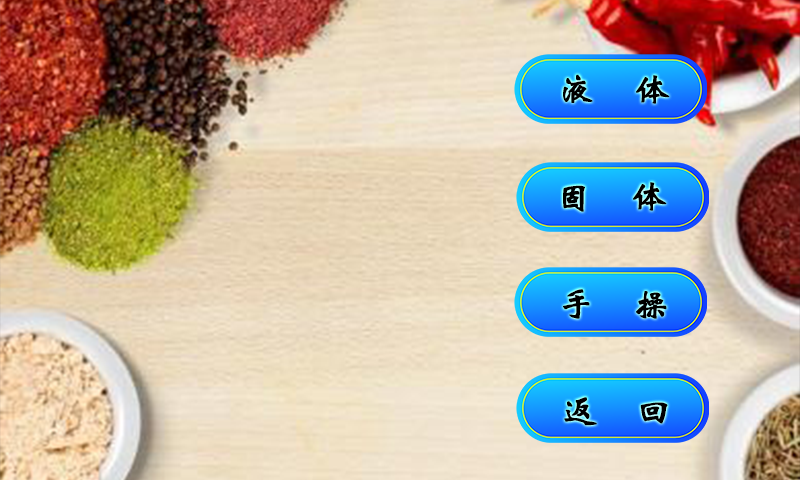
<style>
.page{position:relative;width:800px;height:480px}
.page>*{position:absolute;margin:0}
.t1{font:36px "STXinwei";letter-spacing:-0.005em;color:#000000;font-weight:bold}
.t2{font:100px "STXinwei";letter-spacing:-0.005em;color:#ff0000;font-weight:bold}
</style>
<div class="page">
<p class="t1" style="left:563px;top:74px;width:107px;height:30px"><span class="t2"> </span>液    体</p>
<p class="t1" style="left:563px;top:182px;width:104px;height:30px"><span class="t2"> </span>固    体</p>
<p class="t1" style="left:563px;top:289px;width:104px;height:30px"><span class="t2"> </span>手    操</p>
<p class="t1" style="left:564px;top:397px;width:104px;height:29px"><span class="t2"> </span>返    回</p>
</div>
